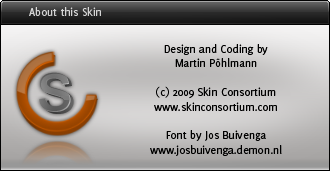
<style>
.page{position:relative;width:330px;height:171px}
.page>*{position:absolute;margin:0}
.t1{font:12px "Delicious-Roman";color:#d4d4d4}
.t2{font:12px "Delicious-Roman";color:#000000}
</style>
<div class="page">
<p class="t1" style="left:29px;top:7px;width:72px;height:9px">About this Skin</p>
<p class="t2" style="left:150px;top:44px;width:132px;height:112px;text-align:center">Design and Coding by<br>Martin Pöhlmann<br><br>(c) 2009 Skin Consortium<br>www.skinconsortium.com<br><br>Font by Jos Buivenga<br>www.josbuivenga.demon.nl</p>
</div>
